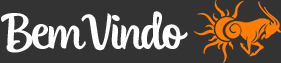
<style>
.page{position:relative;width:281px;height:63px;background:#333333}
.page>*{position:absolute;margin:0}
.t1{font:47.6px "FONTSPRINGDEMO-BlueVinylRegular";letter-spacing:-0.025em;color:#ffffff}
</style>
<div class="page">
<p class="t1" style="left:1px;top:11px;width:187px;height:42px">Bem Vindo</p>
</div>
